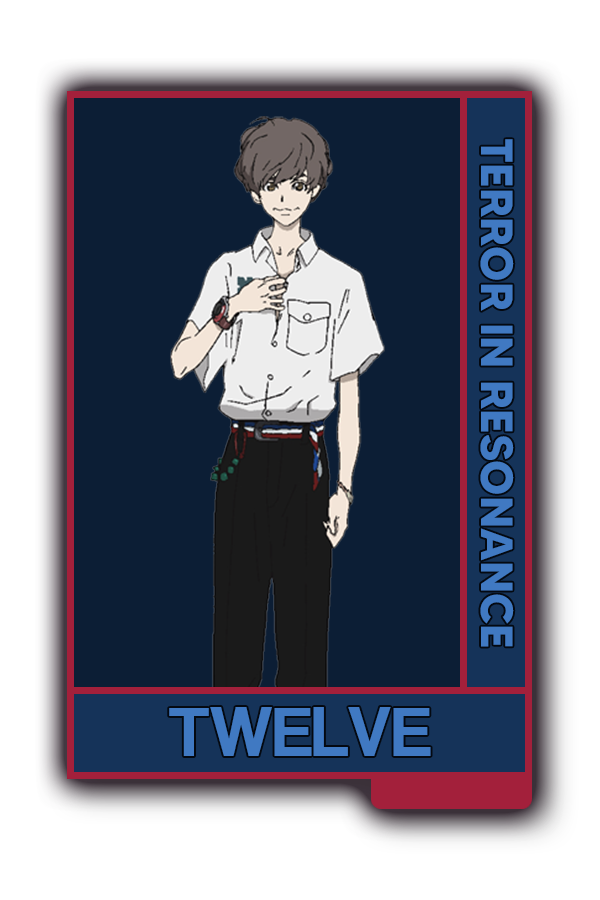
<style>
.page{position:relative;width:600px;height:900px;background:#0c1e35}
.page>*{position:absolute;margin:0}
.t1{font:45.2px "MADETOMMY-Bold";color:#4079c2}
.t2{font:73.3px "CoolveticaRg-Regular";color:#4079c2}
</style>
<div class="page">
<p class="t1" style="left:480px;top:139px;width:34px;height:508px;rotate:90deg">TERROR IN RESONANCE</p>
<p class="t2" style="left:169px;top:707px;width:262px;height:49px">TWELVE</p>
</div>
